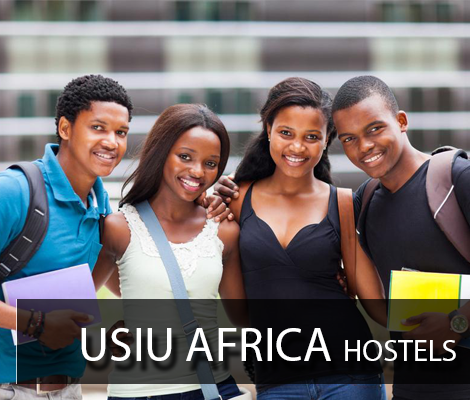
<style>
.page{position:relative;width:470px;height:400px}
.page>*{position:absolute;margin:0}
.t1{font:48px "MyriadPro-Regular";color:#ffffff}
.t2{font:30px "MyriadPro-Regular";color:#ffffff}
</style>
<div class="page">
<p class="t1" style="left:81px;top:328px;width:375px;height:33px">USIU AFRICA <span class="t2">HOSTELS</span></p>
</div>
